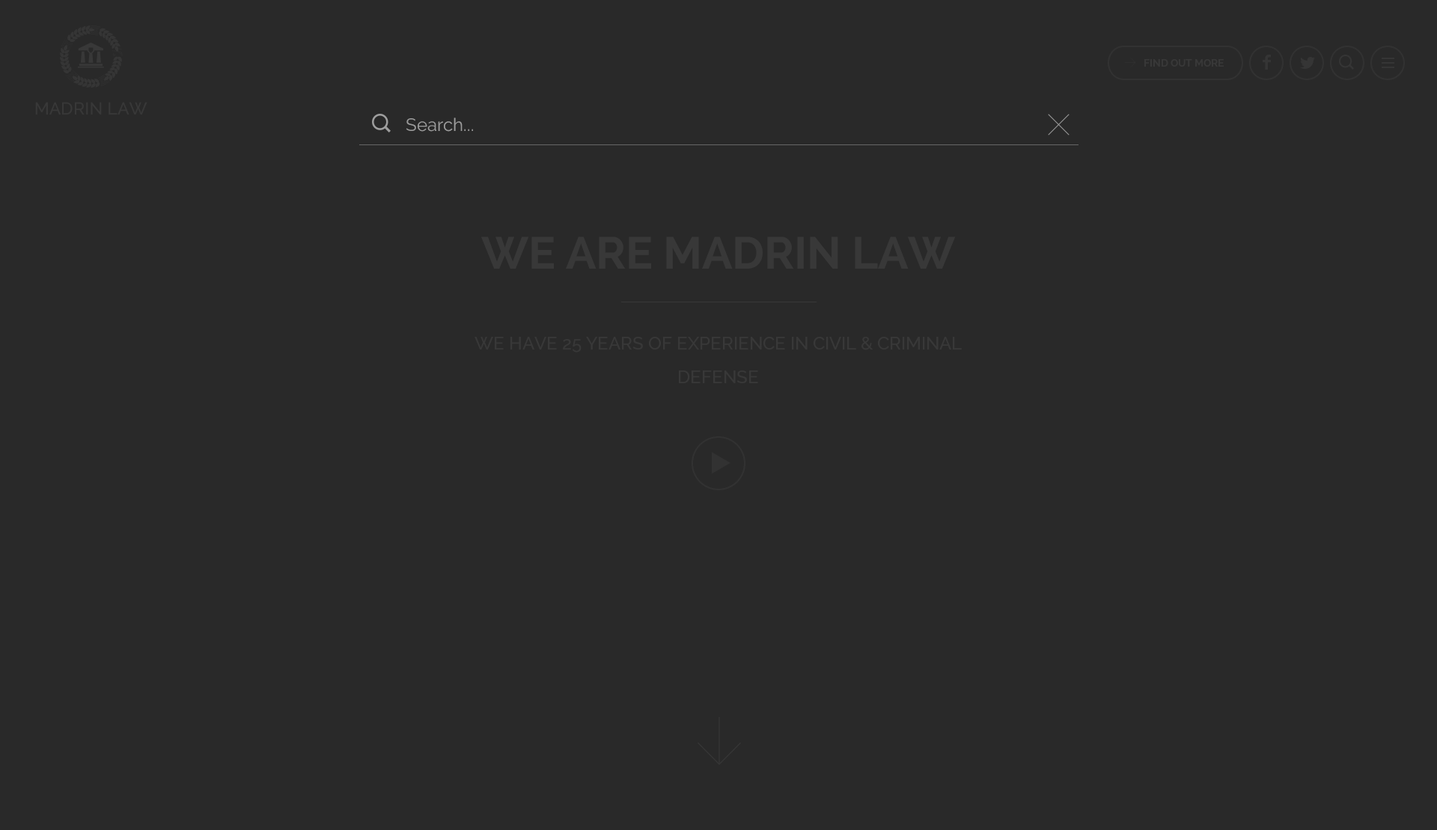
<style>
.page{position:relative;width:1437px;height:830px;background:#292929}
.page>*{position:absolute;margin:0}
.t1{font:10.5px "Raleway-Bold";color:#383838}
.t2{font:17.2px "Raleway-Medium";color:#383838}
.t3{font:18px "Raleway";color:#9c9c9c}
.t4{font:18px/80.8px "Raleway-Medium";color:#383838}
.t5{font:44.9px/202.1px "Raleway-Bold";color:#383838}
.t6{font:18px/34.1px "Raleway-Medium";color:#383838}
</style>
<div class="page">
<p class="t1" style="left:1144px;top:59px;width:80px;height:8px">FIND OUT MORE</p>
<p class="t2" style="left:35px;top:102px;width:112px;height:12px">MADRIN LAW</p>
<p class="t3" style="left:406px;top:117px;width:67px;height:15px">Search...</p>
<p class="t4" style="left:474px;top:236px;width:488px;height:147px;text-align:center"><span class="t5">WE ARE MADRIN LAW<br></span>WE HAVE 25 YEARS OF EXPERIENCE IN CIVIL &amp; CRIMINAL <span class="t6">DEFENSE</span></p>
</div>
